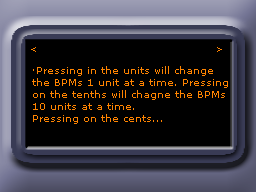
<style>
.page{position:relative;width:256px;height:192px;background:#000000}
.page>*{position:absolute;margin:0}
.t1{font:9px "MSReferenceSansSerif";color:#ff8400}
.t2{font:10px "MSReferenceSansSerif";color:#ff8400}
</style>
<div class="page">
<p class="t1" style="left:31px;top:47px;width:5px;height:5px">&lt;</p>
<p class="t1" style="left:217px;top:47px;width:5px;height:5px">&gt;</p>
<p class="t2" style="left:32px;top:66px;width:196px;height:58px">·Pressing in the units will change <br>the BPMs 1 unit at a time. Pressing<br>on the tenths will chagne the BPMs<br>10 units at a time. <br>Pressing on the cents...</p>
</div>
